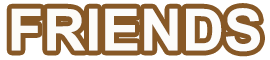
<style>
.page{position:relative;width:270px;height:60px;background:#875826}
.page>*{position:absolute;margin:0}
.t1{font:58px "Arial-BoldMT";color:#ffffff}
</style>
<div class="page">
<p class="t1" style="left:11px;top:8px;width:249px;height:44px">FRIENDS</p>
</div>
